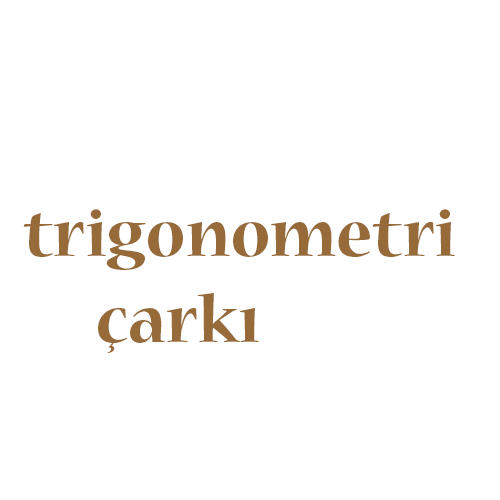
<style>
.page{position:relative;width:500px;height:500px;background:#ffffff}
.page>*{position:absolute;margin:0}
.t1{font:72px "NuevaStd-Bold";color:#966a39}
</style>
<div class="page">
<p class="t1" style="left:23px;top:209px;width:432px;height:144px">trigonometri<br>  çarkı</p>
</div>
